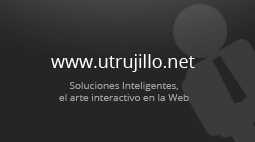
<style>
.page{position:relative;width:255px;height:142px;background:#252525}
.page>*{position:absolute;margin:0}
.t1{font:18px "OpenSans";color:#ffffff}
.t2{font:10px "OpenSans";color:#9f9f9f}
</style>
<div class="page">
<p class="t1" style="left:51px;top:54px;width:144px;height:18px">www.utrujillo.net</p>
<p class="t2" style="left:59px;top:82px;width:130px;height:19px;text-align:center">Soluciones Inteligentes,<br>el arte interactivo en la Web</p>
</div>
